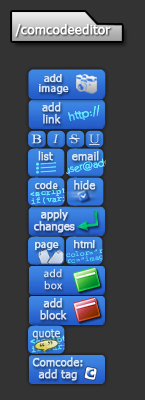
<style>
.page{position:relative;width:145px;height:400px;background:#333333}
.page>*{position:absolute;margin:0}
.t1{font:12px "Tahoma";color:#ffffff;font-weight:bold;scale:1.09 1}
.t2{font:11px/10px "MyriadPro-Regular";color:#d5e1f6;font-weight:bold}
.t3{font:11px/12px "Tahoma";color:#d7e5f8;font-weight:bold}
.t4{font:12px "KabelITCbyBT-Book";color:#66e8ff;font-weight:bold}
.t5{font:13px "TimesNewRomanPSMT";color:#d7e5f8;font-weight:bold;scale:1.13 1}
.t6{font:13px "TimesNewRomanPSMT";color:#d6e4f8;font-style:italic;scale:1.13 1}
.t7{font:13px "TimesNewRomanPSMT";color:#e7effb;scale:1.13 1}
.t8{font:13px "TimesNewRomanPSMT";color:#d6e4f8;scale:1.13 1}
.t9{font:11px "Tahoma";color:#d8e6f9;font-weight:bold}
.t10{font:10.4px "KabelITCbyBT-Book";font-weight:bold}
.t11{font:11px "MyriadPro-Regular";color:#d8e6f9;font-weight:bold;scale:0.95 1}
.t12{font:11px/12px "Tahoma";color:#d5e1f6;font-weight:bold}
.t13{font:11px "MyriadPro-Regular";color:#d8e6f9;font-weight:bold}
.t14{font:7.5px/6px "Courier";font-weight:bold}
.t15{font:11px/12px "MyriadPro-Regular";color:#d7e5f8;font-weight:bold}
.t16{font:11px "Tahoma";color:#d8e6f9;font-weight:bold;scale:0.95 1}
.t17{font:10.8px "TimesNewRomanPSMT";letter-spacing:0.3em;color:#4c4e29;font-weight:bold}
.t18{font:11px/12px "Tahoma";color:#d7e4f8;font-weight:bold}
</style>
<div class="page">
<p class="t1" style="left:15px;top:24px;width:96px;height:13px">/comcodeeditor</p>
<p class="t2" style="left:39px;top:74px;width:30px;height:21px;text-align:center">add<br>image</p>
<p class="t3" style="left:42px;top:102px;width:19px;height:22px;text-align:center">add<br>link</p>
<p class="t4" style="left:68px;top:105px;width:32px;height:16px;rotate:-14deg">http://</p>
<p class="t5" style="left:31px;top:134px;width:11px;height:10px">B</p>
<p class="t6" style="left:52px;top:134px;width:7px;height:9px">I</p>
<p class="t7" style="left:71px;top:134px;width:7px;height:10px">S</p>
<p class="t8" style="left:89px;top:134px;width:11px;height:10px">U</p>
<p class="t9" style="left:38px;top:151px;width:15px;height:10px">list</p>
<p class="t10" style="left:64px;top:155px;width:64px;height:19px;rotate:-12deg">user@address</p>
<p class="t9" style="left:72px;top:151px;width:27px;height:10px">email</p>
<p class="t11" style="left:35px;top:181px;width:23px;height:9px">code</p>
<p class="t9" style="left:74px;top:180px;width:22px;height:10px">hide</p>
<p class="t12" style="left:34px;top:209px;width:41px;height:24px;text-align:center">apply<br>changes</p>
<p class="t13" style="left:35px;top:242px;width:24px;height:9px">page</p>
<p class="t11" style="left:74px;top:240px;width:21px;height:9px">html</p>
<p class="t14" style="left:62px;top:247px;width:54px;height:18px;rotate:-7deg">color=”red”<br>src=”image”</p>
<p class="t15" style="left:44px;top:269px;width:18px;height:21px;text-align:center">add<br>box</p>
<p class="t12" style="left:40px;top:298px;width:27px;height:22px;text-align:center">add<br>block</p>
<p class="t16" style="left:32px;top:329px;width:28px;height:11px">quote</p>
<p class="t17" style="left:39px;top:341px;width:14px;height:6px;rotate:-8deg">“”</p>
<p class="t18" style="left:32px;top:357px;width:51px;height:24px;text-align:center">Comcode:<br>add tag</p>
</div>
